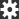
<style>
.page{position:relative;width:19px;height:19px;background:#ffffff}
.page>*{position:absolute;margin:0}
.t1{font:33px "AppleSymbols";letter-spacing:0.01em;color:#ffffff}
</style>
<div class="page">
<p class="t1" style="left:0px;top:0px;width:19px;height:19px">⚙</p>
</div>
